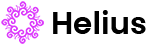
<style>
.page{position:relative;width:151px;height:45px;background:#ffffff}
.page>*{position:absolute;margin:0}
.t1{font:31px "SVN-PoppinsSemiBold";color:#000000}
</style>
<div class="page">
<p class="t1" style="left:53px;top:10px;width:93px;height:24px">Helius</p>
</div>
